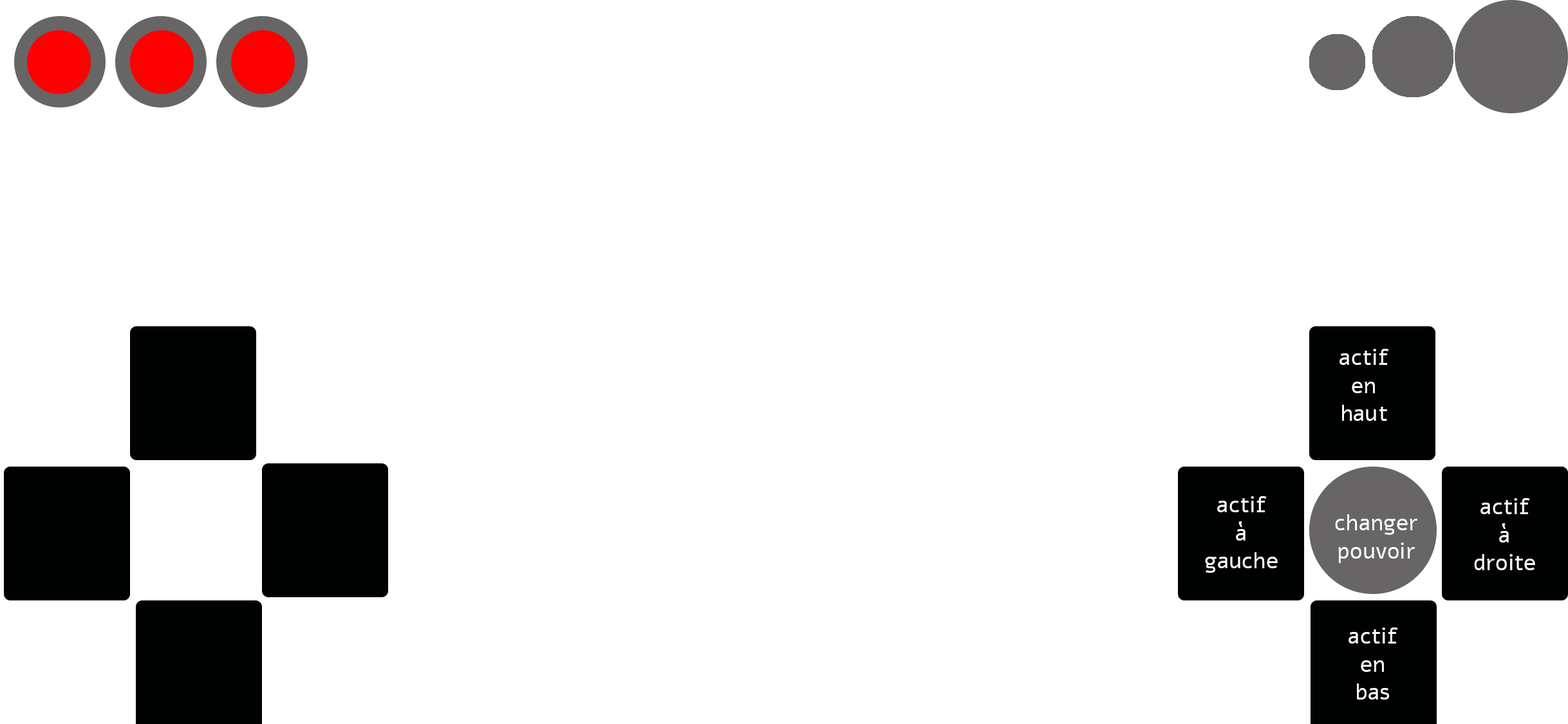
<style>
.page{position:relative;width:1568px;height:724px;background:#ffffff}
.page>*{position:absolute;margin:0}
.t1{font:23.2px "Alef-Regular";color:#ffffff}
</style>
<div class="page">
<p class="t1" style="left:1339px;top:349px;width:50px;height:72px;text-align:center">actif<br>en <br>haut</p>
<p class="t1" style="left:1205px;top:496px;width:73px;height:77px;text-align:center">actif<br>à<br>gauche</p>
<p class="t1" style="left:1474px;top:498px;width:61px;height:72px;text-align:center">actif<br>à<br>droite</p>
<p class="t1" style="left:1335px;top:514px;width:82px;height:49px;text-align:center">changer <br>pouvoir</p>
<p class="t1" style="left:1349px;top:628px;width:49px;height:72px;text-align:center">actif<br>en <br>bas</p>
</div>
